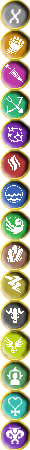
<style>
.page{position:relative;width:30px;height:450px;background:#ffffff}
.page>*{position:absolute;margin:0}
.t1{font:18px "Small Fonts";color:#ffffff;font-weight:bold;font-style:italic}
</style>
<div class="page">
<p class="t1" style="left:9px;top:9px;width:12px;height:15px">X</p>
</div>
